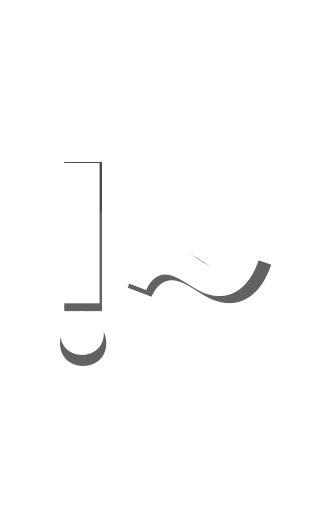
<style>
.page{position:relative;width:310px;height:508px;background:#ffffff}
.page>*{position:absolute;margin:0}
.t1{font:288.9px "NexaBold";color:#ffffff}
</style>
<div class="page">
<p class="t1" style="left:60px;top:162px;width:212px;height:204px">!~</p>
</div>
